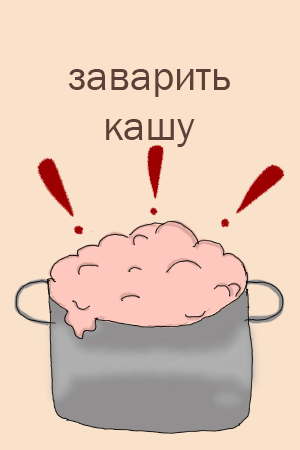
<style>
.page{position:relative;width:300px;height:450px;background:#f9e1ca}
.page>*{position:absolute;margin:0}
.t1{font:41.7px "FranklinGothic-Book";color:#5d4037}
</style>
<div class="page">
<p class="t1" style="left:68px;top:69px;width:162px;height:78px;text-align:center">заварить<br>кашу</p>
</div>
